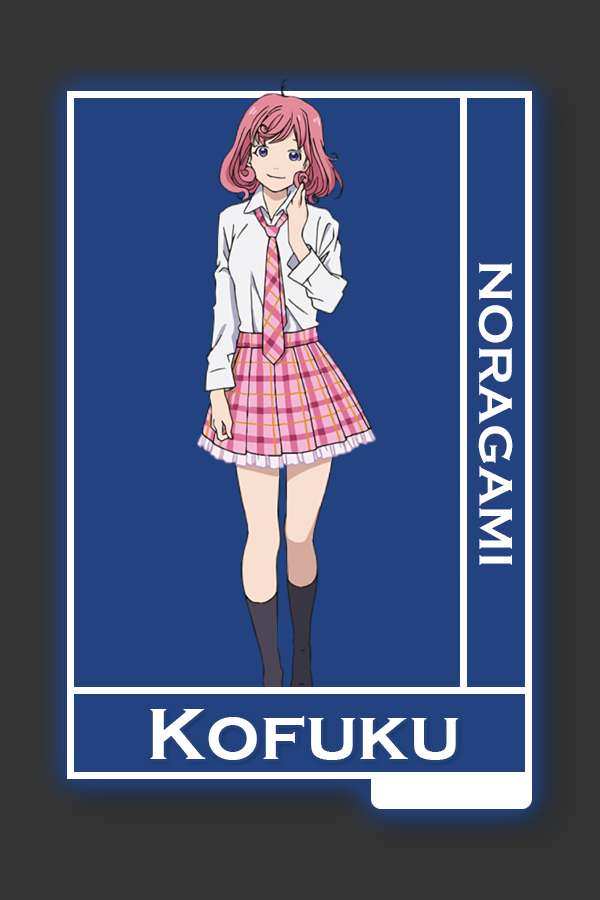
<style>
.page{position:relative;width:600px;height:900px;background:#22437f}
.page>*{position:absolute;margin:0}
.t1{font:48.8px "CopperplateGothic-Bold";color:#ffffff}
.t2{font:75px "CopperplateGothic-Bold";color:#ffffff}
</style>
<div class="page">
<p class="t1" style="left:478px;top:263px;width:35px;height:302px;rotate:90deg">NORAGAMI</p>
<p class="t2" style="left:150px;top:709px;width:308px;height:51px">Kofuku</p>
</div>
